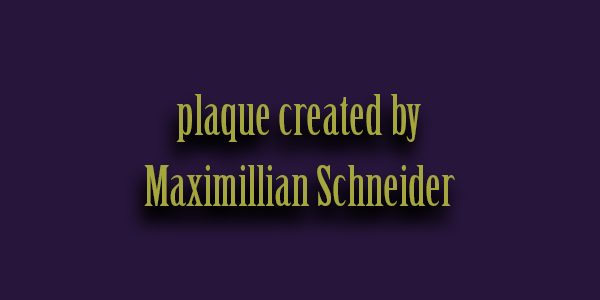
<style>
.page{position:relative;width:600px;height:300px;background:#27153b}
.page>*{position:absolute;margin:0}
.t1{font:55px/70.9px "BirchStd";color:#a5a63e;scale:1.06 1}
</style>
<div class="page">
<p class="t1" style="left:144px;top:94px;width:311px;height:112px;text-align:center">plaque created by<br>Maximillian Schneider</p>
</div>
